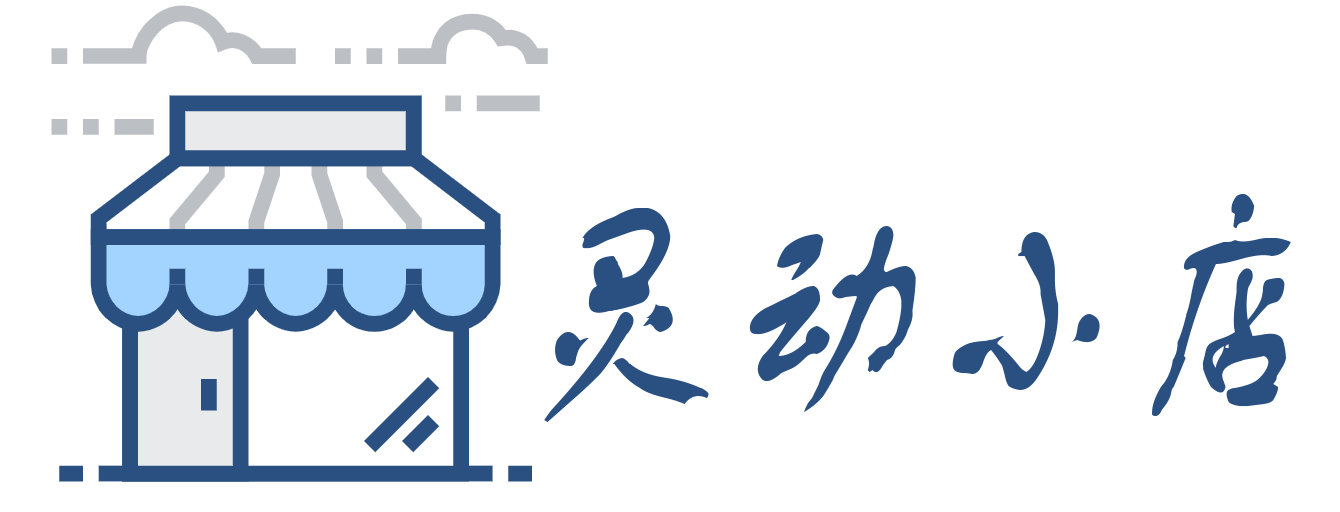
<style>
.page{position:relative;width:1340px;height:512px;background:#ffffff}
.page>*{position:absolute;margin:0}
.t1{font:256.4px "FZSTK--GBK1-0";color:#2a5082;scale:0.79 1}
</style>
<div class="page">
<p class="t1" style="left:544px;top:193px;width:747px;height:229px">灵动小店</p>
</div>
